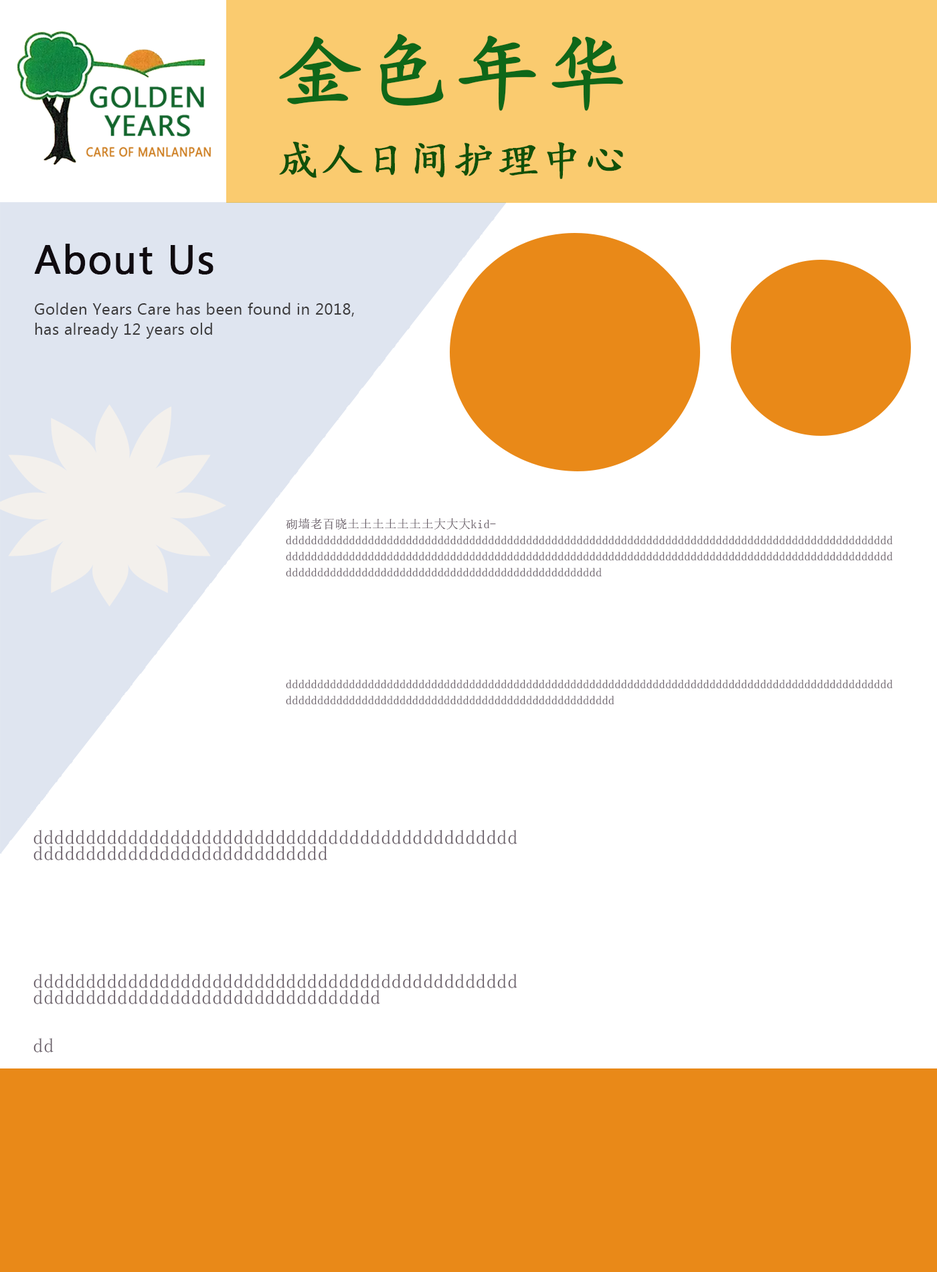
<style>
.page{position:relative;width:937px;height:1272px;background:#ffffff}
.page>*{position:absolute;margin:0}
.t1{font:80.3px "KaiTi";letter-spacing:0.025em;color:#0f6718;font-weight:bold;scale:1.06 1}
.t2{font:40.4px "KaiTi";letter-spacing:0.025em;color:#11510a;font-weight:bold;scale:1.04 1}
.t3{font:40.2px "MicrosoftNewTaiLue";letter-spacing:0.025em;color:#100b10;font-weight:bold}
.t4{font:16.1px/20.1px "MicrosoftNewTaiLue";letter-spacing:0.025em;color:#3b3a3b}
.t5{font:12.1px/16px "SimSun";letter-spacing:0.025em;color:#685d67}
.t6{font:20.1px/16px "SimSun";letter-spacing:0.025em;color:#685d67}
</style>
<div class="page">
<p class="t1" style="left:279px;top:33px;width:344px;height:78px">金色年华</p>
<p class="t2" style="left:279px;top:141px;width:344px;height:38px">成人日间护理中心</p>
<p class="t3" style="left:34px;top:244px;width:180px;height:31px">About Us</p>
<p class="t4" style="left:35px;top:303px;width:319px;height:36px">Golden Years Care has been found in 2018, <br>has already 12 years old</p>
<p class="t5" style="left:286px;top:518px;width:607px;height:187px">砌墙老百晓土土土土土土土大大大kiddddddddddddddddddddddddddddddddddddddddddddddddddddddddddddddddddddddddddddddddddddddddddddddddddddddddddddddddddddddddddddddddddddddddddddddddddddddddddddddddddddddddddddddddddddddddddddddddddddddddddddddddddddddddddddddddddddddddddddddddddd<br><br><br><br><br><br><br>dddddddddddddddddddddddddddddddddddddddddddddddddddddddddddddddddddddddddddddddddddddddddddddddddddddddddddddddddddddddddddddddddddddddddddddddddddd</p>
<p class="t6" style="left:33px;top:830px;width:485px;height:223px">dddddddddddddddddddddddddddddddddddddddddddddddddddddddddddddddddddddddddd<br><br><br><br><br><br><br><br>ddddddddddddddddddddddddddddddddddddddddddddddddddddddddddddddddddddddddddddddd<br><br><br>dd</p>
</div>
